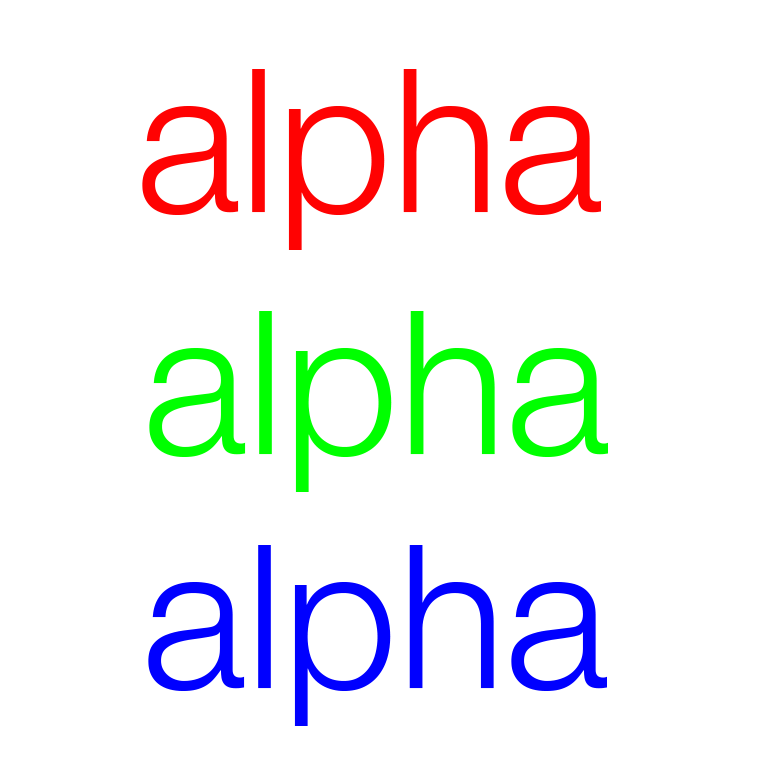
<style>
.page{position:relative;width:768px;height:768px;background:#ffffff}
.page>*{position:absolute;margin:0}
.t1{font:200px "HelveticaNeue-Light";color:#ff0202}
.t2{font:200px "HelveticaNeue-Light";color:#00ff00}
.t3{font:200px "HelveticaNeue-Light";color:#0000ff}
</style>
<div class="page">
<p class="t1" style="left:142px;top:69px;width:459px;height:181px">alpha</p>
<p class="t2" style="left:149px;top:311px;width:459px;height:181px">alpha</p>
<p class="t3" style="left:148px;top:545px;width:459px;height:181px">alpha</p>
</div>
